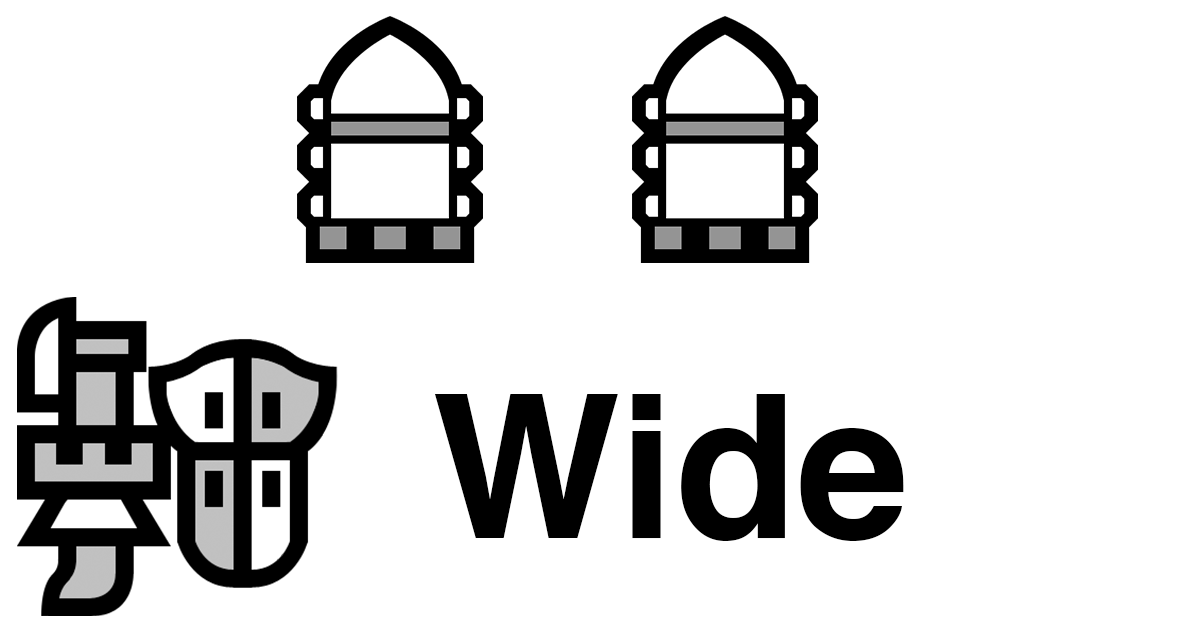
<style>
.page{position:relative;width:1177px;height:626px;background:#ffffff}
.page>*{position:absolute;margin:0}
.t1{font:200px "Helvetica-Bold";color:#000000}
</style>
<div class="page">
<p class="t1" style="left:434px;top:394px;width:470px;height:147px">Wide</p>
</div>
